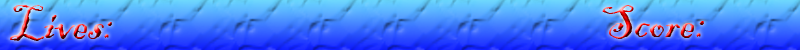
<style>
.page{position:relative;width:800px;height:50px}
.page>*{position:absolute;margin:0}
.t1{font:48px "BlackadderITC-Regular"}
</style>
<div class="page">
<p class="t1" style="left:10px;top:5px;width:102px;height:36px">Lives:</p>
<p class="t1" style="left:602px;top:5px;width:102px;height:34px">Score:</p>
</div>
